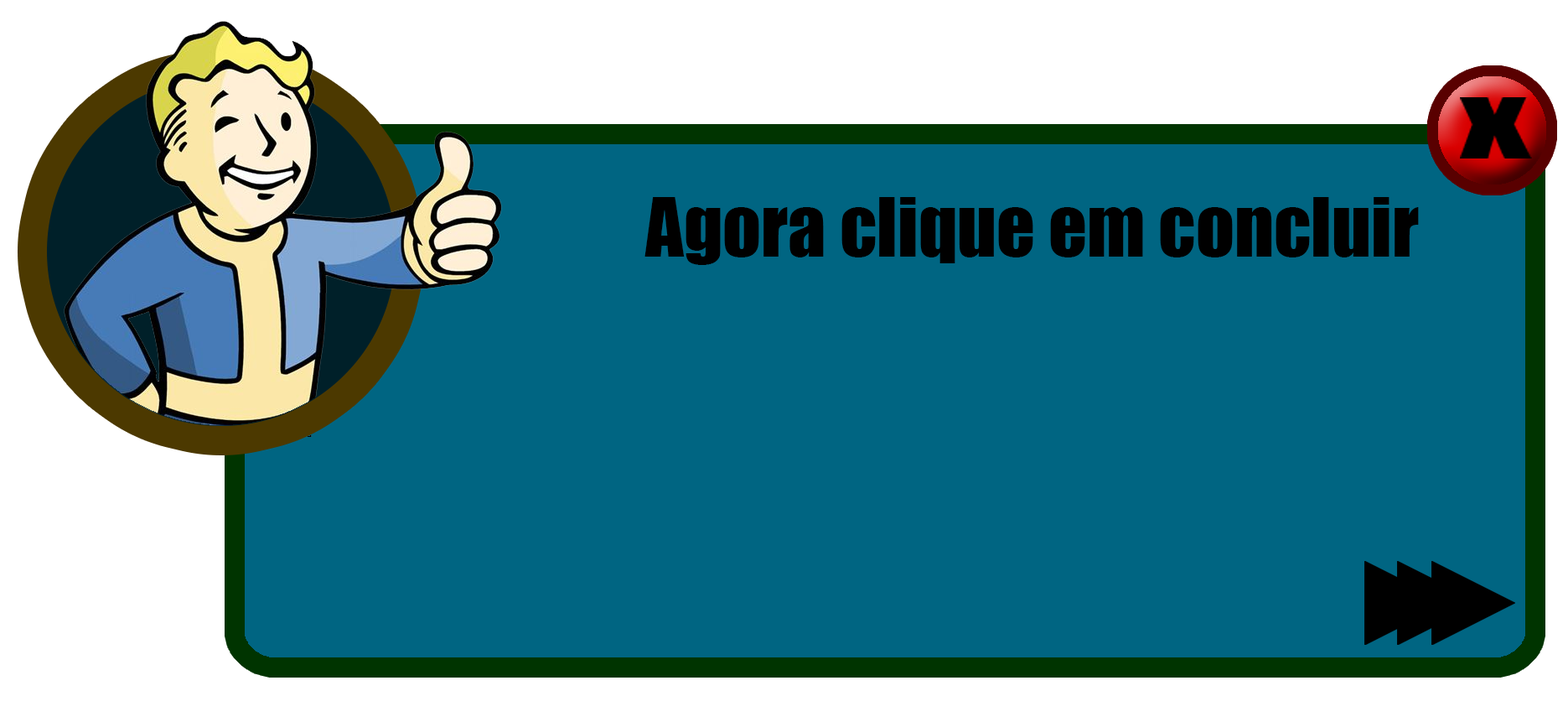
<style>
.page{position:relative;width:1568px;height:722px;background:#006582}
.page>*{position:absolute;margin:0}
.t1{font:75.4px "Impact";color:#000000}
</style>
<div class="page">
<p class="t1" style="left:644px;top:197px;width:775px;height:68px">Agora clique em concluir</p>
</div>
